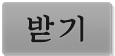
<style>
.page{position:relative;width:115px;height:56px}
.page>*{position:absolute;margin:0}
.t1{font:31px "SDKukdetopokki-aLt";letter-spacing:0.12em;color:#181818}
</style>
<div class="page">
<p class="t1" style="left:27px;top:14px;width:57px;height:29px">받기</p>
</div>
